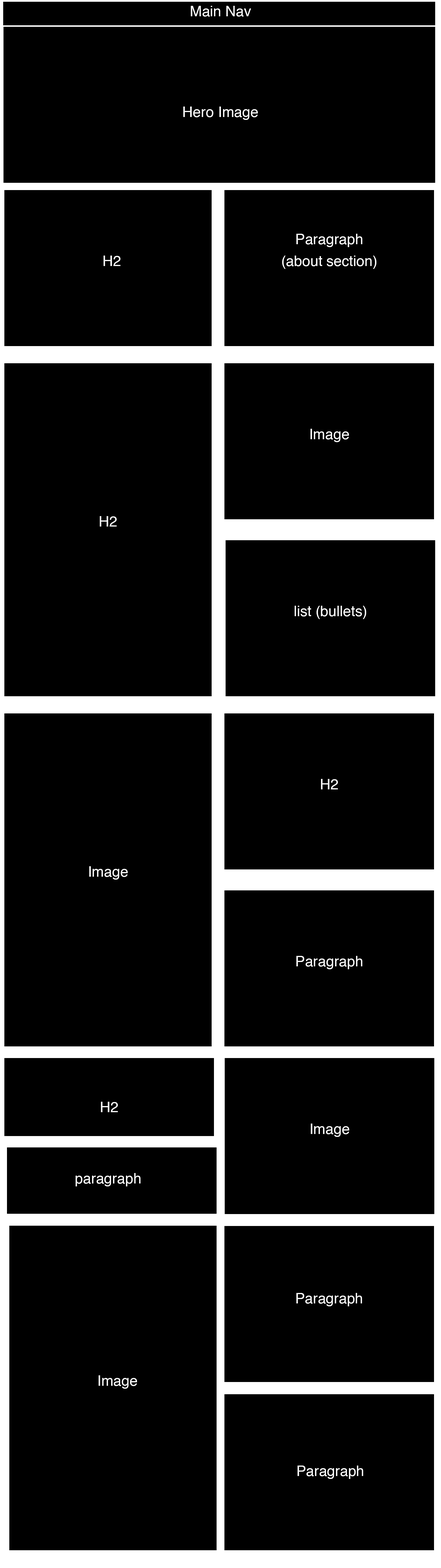
<style>
.page{position:relative;width:441px;height:1568px;background:#000000}
.page>*{position:absolute;margin:0}
.t1{font:14.6px "Helvetica";color:#ffffff}
.t2{font:14.6px/21.8px "Helvetica";color:#ffffff}
</style>
<div class="page">
<p class="t1" style="left:191px;top:6px;width:60px;height:11px">Main Nav</p>
<p class="t1" style="left:183px;top:107px;width:75px;height:13px">Hero Image</p>
<p class="t2" style="left:282px;top:234px;width:94px;height:35px;text-align:center">Paragraph<br>(about section)</p>
<p class="t1" style="left:103px;top:256px;width:18px;height:10px">H2</p>
<p class="t1" style="left:310px;top:429px;width:39px;height:13px">Image</p>
<p class="t1" style="left:100px;top:516px;width:17px;height:11px">H2</p>
<p class="t1" style="left:295px;top:606px;width:71px;height:13px">list (bullets)</p>
<p class="t1" style="left:321px;top:779px;width:17px;height:10px">H2</p>
<p class="t1" style="left:89px;top:866px;width:39px;height:14px">Image</p>
<p class="t1" style="left:296px;top:956px;width:66px;height:13px">Paragraph</p>
<p class="t1" style="left:101px;top:1102px;width:17px;height:10px">H2</p>
<p class="t1" style="left:311px;top:1124px;width:38px;height:13px">Image</p>
<p class="t1" style="left:75px;top:1173px;width:66px;height:13px">paragraph</p>
<p class="t1" style="left:296px;top:1293px;width:66px;height:13px">Paragraph</p>
<p class="t1" style="left:98px;top:1375px;width:39px;height:14px">Image</p>
<p class="t1" style="left:297px;top:1466px;width:66px;height:13px">Paragraph</p>
</div>
